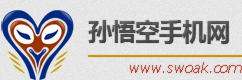
<style>
.page{position:relative;width:242px;height:80px}
.page>*{position:absolute;margin:0}
.t1{font:23.6px "MicrosoftYaHei-Bold";color:#4d4d4d}
.t2{font:13.7px "Verdana-Italic";color:#d44836}
</style>
<div class="page">
<p class="t1" style="left:88px;top:20px;width:141px;height:24px">孙悟空手机网</p>
<p class="t2" style="left:130px;top:62px;width:112px;height:11px">www.swoak.com</p>
</div>
